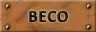
<style>
.page{position:relative;width:96px;height:32px}
.page>*{position:absolute;margin:0}
.t1{font:17.3px "Calibri-Bold";letter-spacing:0.005em;text-transform:uppercase;font-weight:bold}
</style>
<div class="page">
<p class="t1" style="left:28px;top:10px;width:40px;height:13px">beco</p>
</div>
